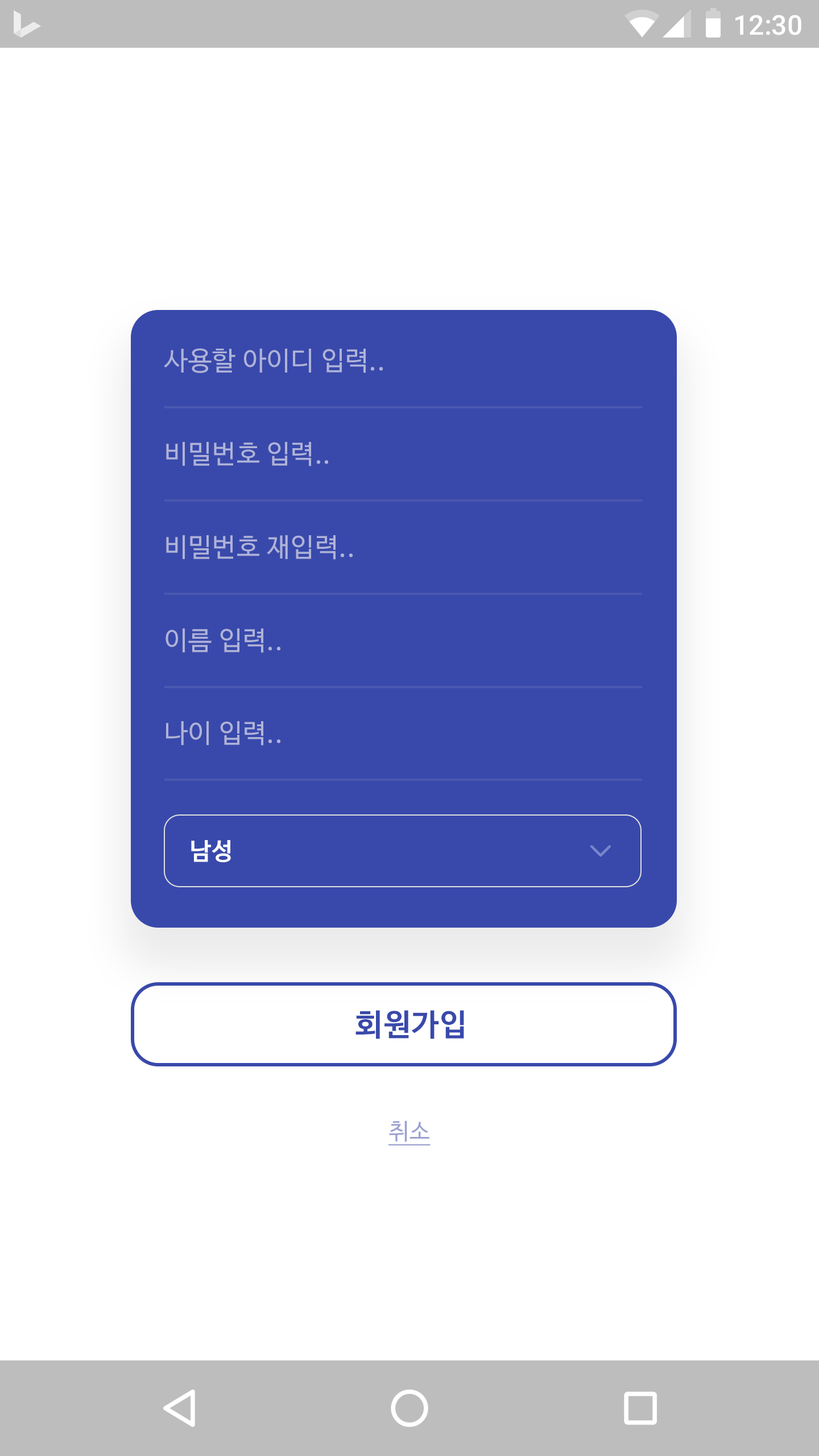
<style>
.page{position:relative;width:819px;height:1456px;background:#ffffff}
.page>*{position:absolute;margin:0}
.t1{font:27.3px "Roboto-Medium";color:#ffffff}
.t2{font:26.2px "NanumBarunGothic";letter-spacing:0.025em;color:#afb3d8}
.t3{font:23.9px "NanumBarunGothicBold";letter-spacing:0.025em;color:#ffffff}
.t4{font:30.7px "NanumBarunGothicBold";letter-spacing:0.025em;color:#3949ab}
.t5{font:22.7px "NanumBarunGothic";letter-spacing:0.025em;color:#9ca1cf;text-decoration:underline}
</style>
<div class="page">
<p class="t1" style="left:735px;top:15px;width:66px;height:20px">12:30</p>
<p class="t2" style="left:164px;top:348px;width:219px;height:25px">사용할 아이디 입력..</p>
<p class="t2" style="left:166px;top:442px;width:162px;height:24px">비밀번호 입력..</p>
<p class="t2" style="left:166px;top:535px;width:187px;height:25px">비밀번호 재입력..</p>
<p class="t2" style="left:166px;top:628px;width:114px;height:25px">이름 입력..</p>
<p class="t2" style="left:166px;top:721px;width:114px;height:25px">나이 입력..</p>
<p class="t3" style="left:191px;top:840px;width:40px;height:22px">남성</p>
<p class="t4" style="left:355px;top:1010px;width:109px;height:29px">회원가입</p>
<p class="t5" style="left:388px;top:1120px;width:43px;height:25px">취소</p>
</div>
